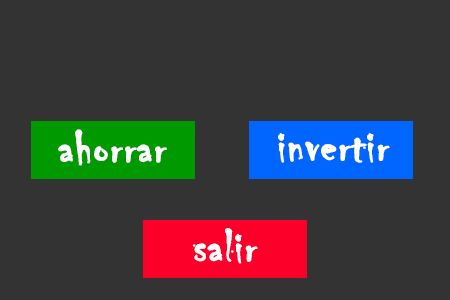
<style>
.page{position:relative;width:450px;height:300px;background:#333333}
.page>*{position:absolute;margin:0}
.t1{font:48px "Chiller-Regular";letter-spacing:0.01em;color:#ffffff;font-weight:bold}
</style>
<div class="page">
<p class="t1" style="left:58px;top:129px;width:109px;height:37px">ahorrar</p>
<p class="t1" style="left:278px;top:133px;width:112px;height:30px">invertir</p>
<p class="t1" style="left:192px;top:228px;width:66px;height:36px">salir</p>
</div>
